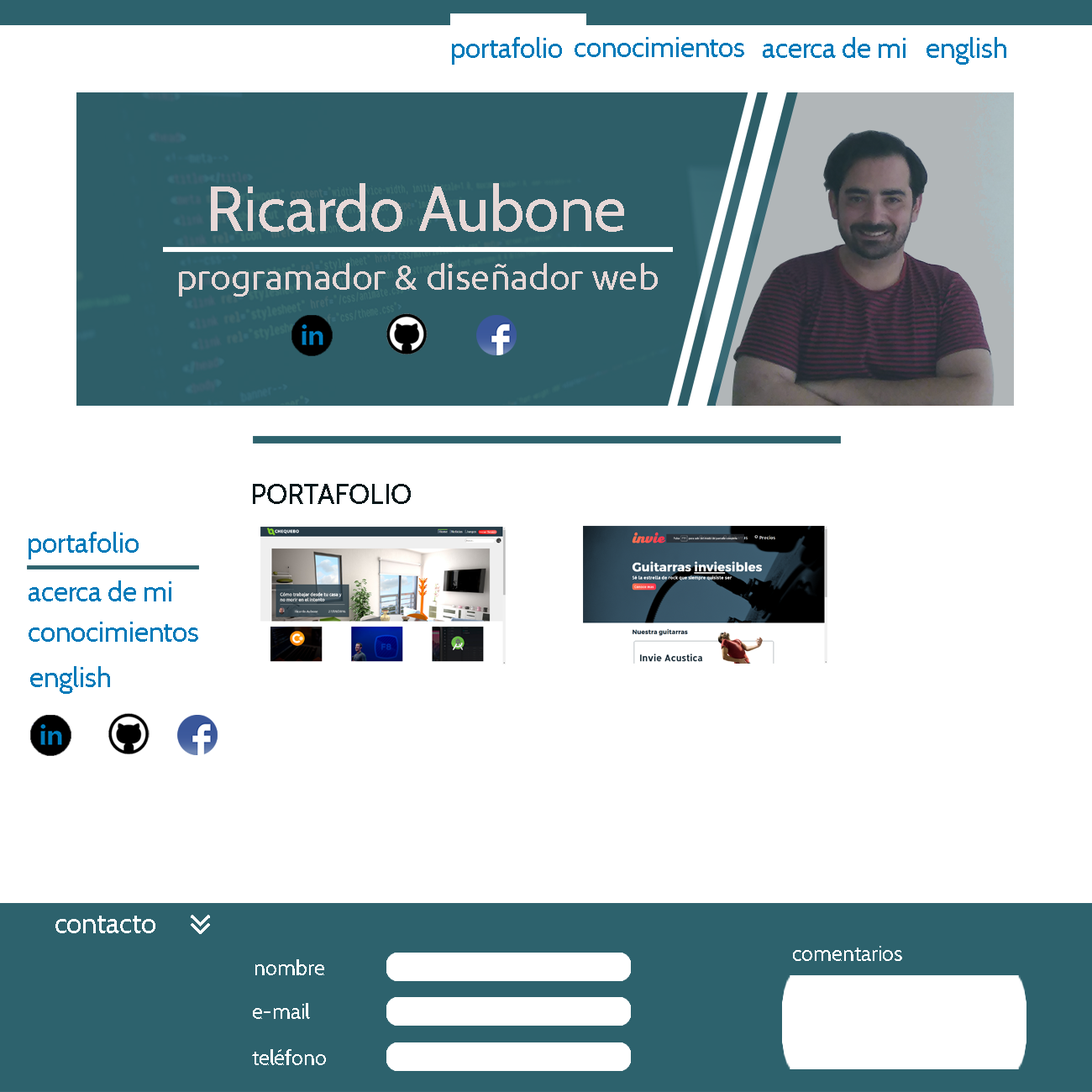
<style>
.page{position:relative;width:1092px;height:1092px;background:#ffffff}
.page>*{position:absolute;margin:0}
.t1{font:28px "Cabin-Regular";color:#007ab9}
.t2{font:63px "Cabin-Regular";color:#e7d8d7}
.t3{font:35px "Ubuntu";color:#e7d8d7}
.t4{font:28px "Cabin-Regular";color:#07171a}
.t5{font:28px "Cabin-Regular";color:#ffffff}
.t6{font:21px "Cabin-Regular";color:#ffffff}
</style>
<div class="page">
<p class="t1" style="left:452px;top:37px;width:110px;height:28px">portafolio</p>
<p class="t1" style="left:575px;top:37px;width:169px;height:20px">conocimientos</p>
<p class="t1" style="left:763px;top:37px;width:143px;height:21px">acerca de mi</p>
<p class="t1" style="left:927px;top:37px;width:79px;height:28px">english</p>
<p class="t2" style="left:211px;top:183px;width:413px;height:49px">Ricardo Aubone</p>
<p class="t3" style="left:179px;top:263px;width:479px;height:34px">programador &amp; diseñador web</p>
<p class="t4" style="left:253px;top:484px;width:158px;height:20px">PORTAFOLIO</p>
<p class="t1" style="left:29px;top:532px;width:110px;height:27px">portafolio</p>
<p class="t1" style="left:29px;top:580px;width:142px;height:21px">acerca de mi</p>
<p class="t1" style="left:29px;top:622px;width:169px;height:20px">conocimientos</p>
<p class="t1" style="left:30px;top:666px;width:80px;height:28px">english</p>
<p class="t5" style="left:55px;top:916px;width:100px;height:17px">contacto</p>
<p class="t6" style="left:793px;top:946px;width:109px;height:15px">comentarios</p>
<p class="t6" style="left:255px;top:959px;width:69px;height:16px">nombre</p>
<p class="t6" style="left:253px;top:1003px;width:57px;height:16px">e-mail</p>
<p class="t6" style="left:252px;top:1049px;width:74px;height:16px">teléfono</p>
</div>
